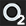
<style>
.page{position:relative;width:26px;height:26px;background:#212121}
.page>*{position:absolute;margin:0}
.t1{font:14.6px "CourierNewPS-BoldMT";color:#ffffff}
</style>
<div class="page">
<p class="t1" style="left:17px;top:14px;width:8px;height:11px">2</p>
</div>
